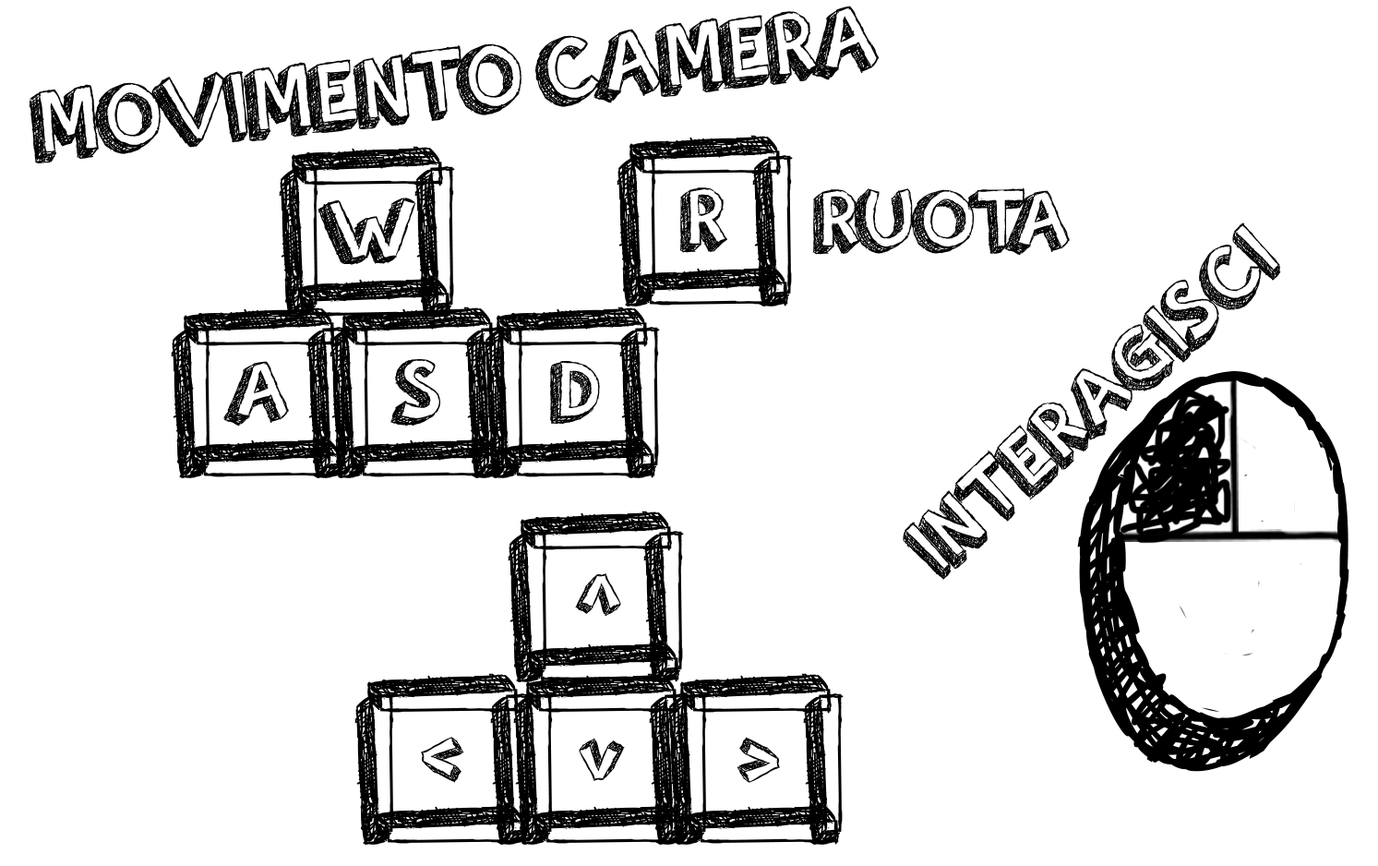
<style>
.page{position:relative;width:1378px;height:866px;background:#ffffff}
.page>*{position:absolute;margin:0}
.t1{font:98.9px "orangejuice";color:#000000;scale:0.95 1}
.t2{font:89.5px "orangejuice";color:#000000}
</style>
<div class="page">
<p class="t1" style="left:29px;top:6px;width:850px;height:157px;rotate:-6deg">MOVIMENTO CAMERA</p>
<p class="t2" style="left:317px;top:197px;width:98px;height:68px">W</p>
<p class="t2" style="left:679px;top:187px;width:48px;height:66px">R</p>
<p class="t2" style="left:812px;top:187px;width:257px;height:69px">RUOTA</p>
<p class="t2" style="left:902px;top:222px;width:379px;height:357px;rotate:-42deg">INTERAGISCI</p>
<p class="t2" style="left:223px;top:361px;width:66px;height:65px">A</p>
<p class="t2" style="left:390px;top:359px;width:50px;height:67px">S</p>
<p class="t2" style="left:550px;top:361px;width:50px;height:63px">D</p>
</div>
